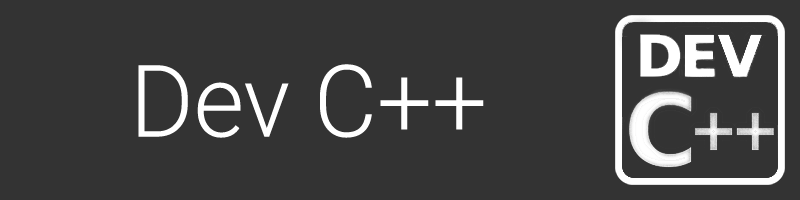
<style>
.page{position:relative;width:800px;height:200px;background:#333333}
.page>*{position:absolute;margin:0}
.t1{font:100px "Roboto-Light";color:#ffffff}
</style>
<div class="page">
<p class="t1" style="left:138px;top:64px;width:346px;height:74px">Dev C++</p>
</div>
